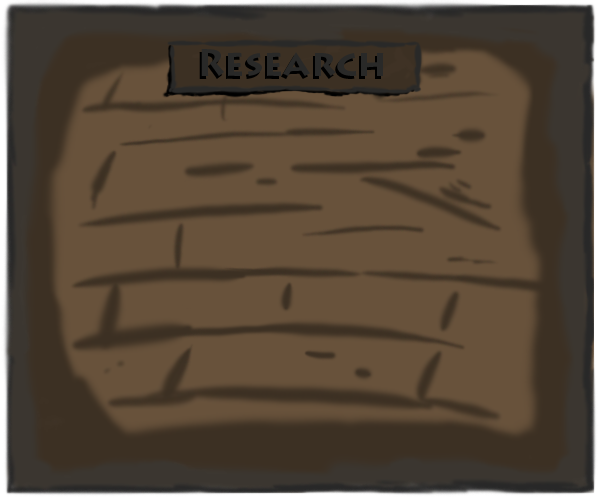
<style>
.page{position:relative;width:600px;height:500px;background:#68523b}
.page>*{position:absolute;margin:0}
.t1{font:37px "LithosPro-Bold"}
.t2{font:37px "LithosPro-Bold";color:#292928}
</style>
<div class="page">
<p class="t1" style="left:199px;top:52px;width:183px;height:27px">Research</p>
<p class="t2" style="left:201px;top:49px;width:183px;height:27px">Research</p>
</div>
